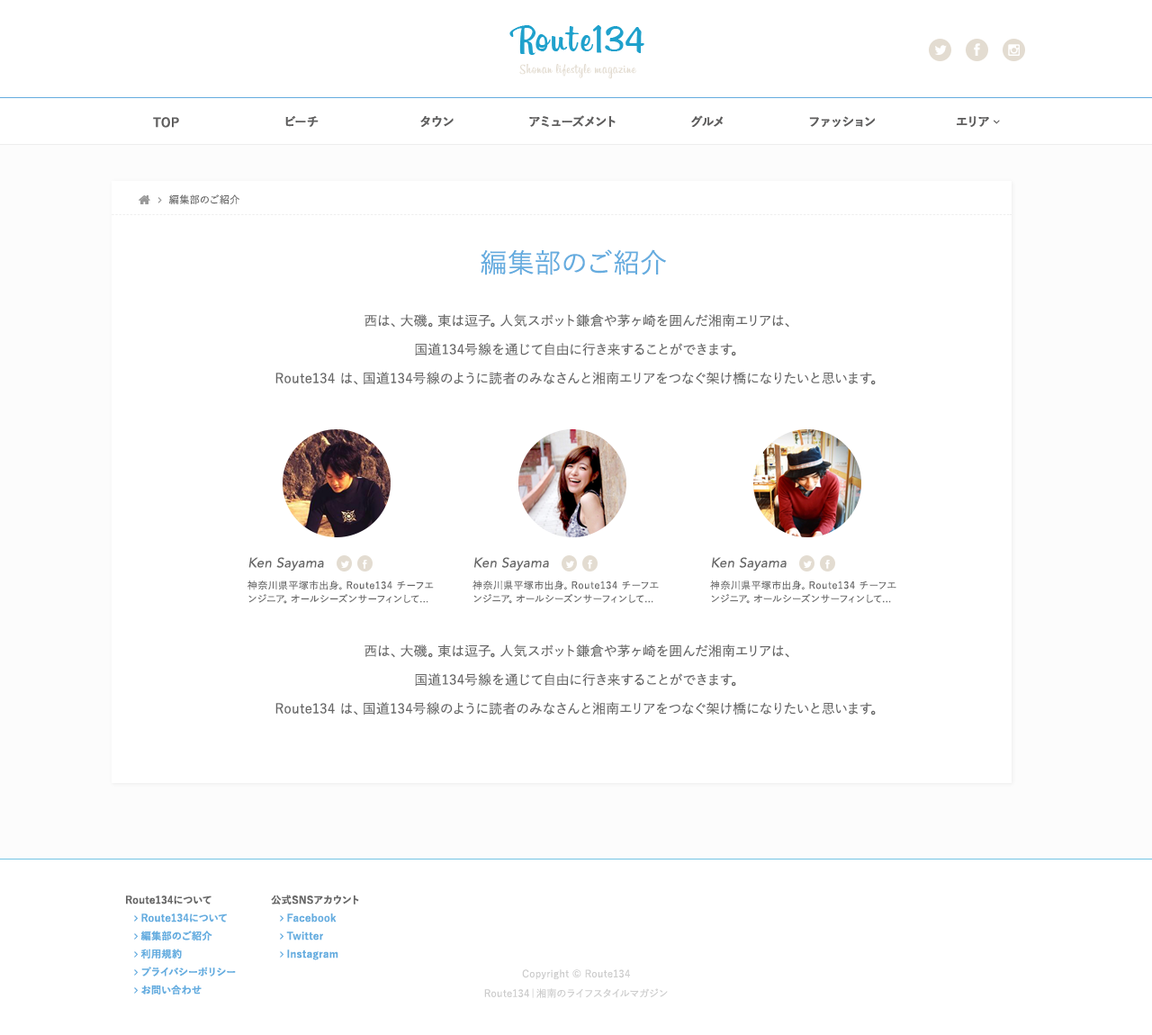
<style>
.page{position:relative;width:1152px;height:1035px;background:#ffffff}
.page>*{position:absolute;margin:0}
.t1{font:13.5px "Billabong";letter-spacing:0.05em;color:#e3dcd1}
.t2{font:12.4px "YuGo-Bold";letter-spacing:0.025em;color:#666666}
.t3{font:10.1px "YuGo-Medium";letter-spacing:0.025em;color:#666666}
.t4{font:27px "YuGo-Medium";letter-spacing:0.025em;color:#65acdf}
.t5{font:13.5px/28.8px "YuGo-Medium";letter-spacing:0.025em;color:#666666}
.t6{font:13.5px "Avenir-Oblique";letter-spacing:0.025em;color:#666666}
.t7{font:9.9px/13.5px "YuGo-Medium";letter-spacing:0.05em;color:#666666}
.t8{font:10.1px "YuGo-Bold";letter-spacing:0.025em;color:#666666}
.t9{font:10.1px/19.6px "YuGo-Medium";letter-spacing:0.025em;color:#cccccc}
</style>
<div class="page">
<p class="t1" style="left:519px;top:64px;width:117px;height:15px">Shonan lifestyle magazine</p>
<p class="t2" style="left:153px;top:117px;width:26px;height:11px">TOP</p>
<p class="t2" style="left:285px;top:116px;width:34px;height:11px">ビーチ</p>
<p class="t2" style="left:420px;top:115px;width:34px;height:12px">タウン</p>
<p class="t2" style="left:529px;top:115px;width:87px;height:12px">アミューズメント</p>
<p class="t2" style="left:691px;top:115px;width:32px;height:12px">グルメ</p>
<p class="t2" style="left:809px;top:116px;width:66px;height:11px">ファッション</p>
<p class="t3" style="left:169px;top:194px;width:71px;height:10px">編集部のご紹介</p>
<p class="t4" style="left:481px;top:249px;width:185px;height:26px">編集部のご紹介</p>
<p class="t5" style="left:275px;top:314px;width:601px;height:71px;text-align:center">西は、大磯。東は逗子。人気スポット鎌倉や茅ヶ崎を囲んだ湘南エリアは、<br>国道134号線を通じて自由に行き来することができます。<br>Route134 は、国道134号線のように読者のみなさんと湘南エリアをつなぐ架け橋になりたいと思います。</p>
<p class="t6" style="left:248px;top:557px;width:76px;height:14px">Ken Sayama</p>
<p class="t6" style="left:474px;top:557px;width:75px;height:14px">Ken Sayama</p>
<p class="t6" style="left:712px;top:557px;width:75px;height:14px">Ken Sayama</p>
<p class="t7" style="left:248px;top:581px;width:186px;height:23px">神奈川県平塚市出身。Route134 チーフエンジニア。オールシーズンサーフィンして...</p>
<p class="t7" style="left:473px;top:581px;width:186px;height:23px">神奈川県平塚市出身。Route134 チーフエンジニア。オールシーズンサーフィンして...</p>
<p class="t7" style="left:710px;top:581px;width:186px;height:23px">神奈川県平塚市出身。Route134 チーフエンジニア。オールシーズンサーフィンして...</p>
<p class="t5" style="left:275px;top:644px;width:601px;height:72px;text-align:center">西は、大磯。東は逗子。人気スポット鎌倉や茅ヶ崎を囲んだ湘南エリアは、<br>国道134号線を通じて自由に行き来することができます。<br>Route134 は、国道134号線のように読者のみなさんと湘南エリアをつなぐ架け橋になりたいと思います。</p>
<p class="t8" style="left:126px;top:896px;width:86px;height:9px">Route134について</p>
<p class="t8" style="left:271px;top:895px;width:88px;height:10px">公式SNSアカウント</p>
<p class="t9" style="left:484px;top:969px;width:184px;height:29px;text-align:center">Copyright © Route134<br>Route134｜湘南のライフスタイルマガジン</p>
</div>
